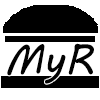
<style>
.page{position:relative;width:100px;height:100px;background:#ffffff}
.page>*{position:absolute;margin:0}
.t1{font:41.2px "MVBoli";color:#020202}
</style>
<div class="page">
<p class="t1" style="left:7px;top:43px;width:87px;height:41px">MyR</p>
</div>
